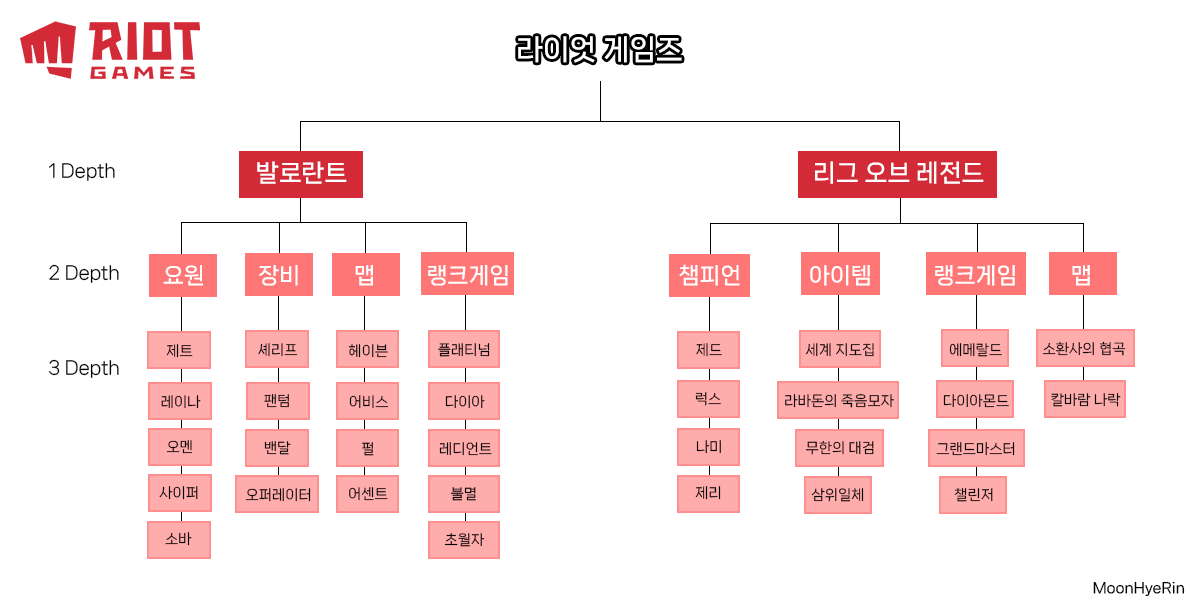
<style>
.page{position:relative;width:1190px;height:600px;background:#ffffff}
.page>*{position:absolute;margin:0}
.t1{font:28px "NanumSquareNeoTTF-cBd";color:#ffffff}
.t2{font:24px "NanumSquareNeoTTF-cBd";color:#ffffff}
.t3{font:18px "NanumSquareNeoTTF-bRg";color:#000000}
.t4{font:22px "NanumSquareNeoTTF-cBd";color:#ffffff}
.t5{font:22px "NanumSquareNeoTTF-cBd";color:#fffefe}
.t6{font:14px "NanumSquareNeoTTF-bRg";color:#000000}
.t7{font:14px "NanumSquareNeoTTF-cBd";color:#000000}
</style>
<div class="page">
<p class="t1" style="left:518px;top:36px;width:164px;height:27px">라이엇 게임즈</p>
<p class="t2" style="left:257px;top:161px;width:90px;height:23px">발로란트</p>
<p class="t2" style="left:815px;top:161px;width:169px;height:23px">리그 오브 레전드</p>
<p class="t3" style="left:49px;top:163px;width:66px;height:18px">1 Depth</p>
<p class="t3" style="left:49px;top:264px;width:70px;height:19px">2 Depth</p>
<p class="t4" style="left:163px;top:265px;width:40px;height:21px">요원</p>
<p class="t4" style="left:259px;top:265px;width:39px;height:21px">장비</p>
<p class="t4" style="left:355px;top:265px;width:18px;height:21px">맵</p>
<p class="t5" style="left:428px;top:265px;width:80px;height:21px">랭크게임</p>
<p class="t4" style="left:679px;top:264px;width:61px;height:22px">챔피언</p>
<p class="t4" style="left:810px;top:265px;width:60px;height:21px">아이템</p>
<p class="t4" style="left:935px;top:265px;width:80px;height:21px">랭크게임</p>
<p class="t4" style="left:1072px;top:265px;width:18px;height:21px">맵</p>
<p class="t6" style="left:1042px;top:341px;width:84px;height:15px">소환사의 협곡</p>
<p class="t6" style="left:166px;top:344px;width:27px;height:14px">제트</p>
<p class="t6" style="left:258px;top:343px;width:40px;height:14px">셰리프</p>
<p class="t6" style="left:348px;top:344px;width:40px;height:14px">헤이븐</p>
<p class="t6" style="left:438px;top:343px;width:52px;height:14px">플래티넘</p>
<p class="t6" style="left:696px;top:343px;width:26px;height:14px">제드</p>
<p class="t6" style="left:805px;top:343px;width:69px;height:14px">세계 지도집</p>
<p class="t6" style="left:949px;top:343px;width:53px;height:14px">에메랄드</p>
<p class="t3" style="left:49px;top:359px;width:70px;height:19px">3 Depth</p>
<p class="t6" style="left:161px;top:395px;width:40px;height:14px">레이나</p>
<p class="t6" style="left:264px;top:394px;width:25px;height:14px">팬텀</p>
<p class="t6" style="left:349px;top:395px;width:40px;height:14px">어비스</p>
<p class="t6" style="left:445px;top:395px;width:40px;height:14px">다이아</p>
<p class="t6" style="left:695px;top:392px;width:26px;height:14px">럭스</p>
<p class="t6" style="left:785px;top:394px;width:109px;height:14px">라바돈의 죽음모자</p>
<p class="t6" style="left:943px;top:394px;width:66px;height:14px">다이아몬드</p>
<p class="t6" style="left:1051px;top:393px;width:70px;height:14px">칼바람 나락</p>
<p class="t6" style="left:166px;top:440px;width:27px;height:14px">오멘</p>
<p class="t6" style="left:264px;top:441px;width:27px;height:14px">밴달</p>
<p class="t6" style="left:362px;top:442px;width:12px;height:14px">펄</p>
<p class="t6" style="left:439px;top:442px;width:53px;height:14px">레디언트</p>
<p class="t6" style="left:696px;top:440px;width:25px;height:14px">나미</p>
<p class="t6" style="left:805px;top:440px;width:69px;height:15px">무한의 대검</p>
<p class="t6" style="left:936px;top:442px;width:79px;height:14px">그랜드마스터</p>
<p class="t6" style="left:159px;top:486px;width:39px;height:14px">사이퍼</p>
<p class="t6" style="left:695px;top:486px;width:26px;height:14px">제리</p>
<p class="t6" style="left:245px;top:488px;width:66px;height:14px">오퍼레이터</p>
<p class="t6" style="left:349px;top:487px;width:39px;height:14px">어센트</p>
<p class="t6" style="left:450px;top:487px;width:26px;height:14px">불멸</p>
<p class="t6" style="left:811px;top:488px;width:53px;height:14px">삼위일체</p>
<p class="t6" style="left:954px;top:487px;width:39px;height:15px">챌린저</p>
<p class="t6" style="left:165px;top:532px;width:27px;height:14px">소바</p>
<p class="t6" style="left:444px;top:533px;width:41px;height:14px">초월자</p>
<p class="t7" style="left:1093px;top:581px;width:92px;height:16px">MoonHyeRin</p>
</div>
